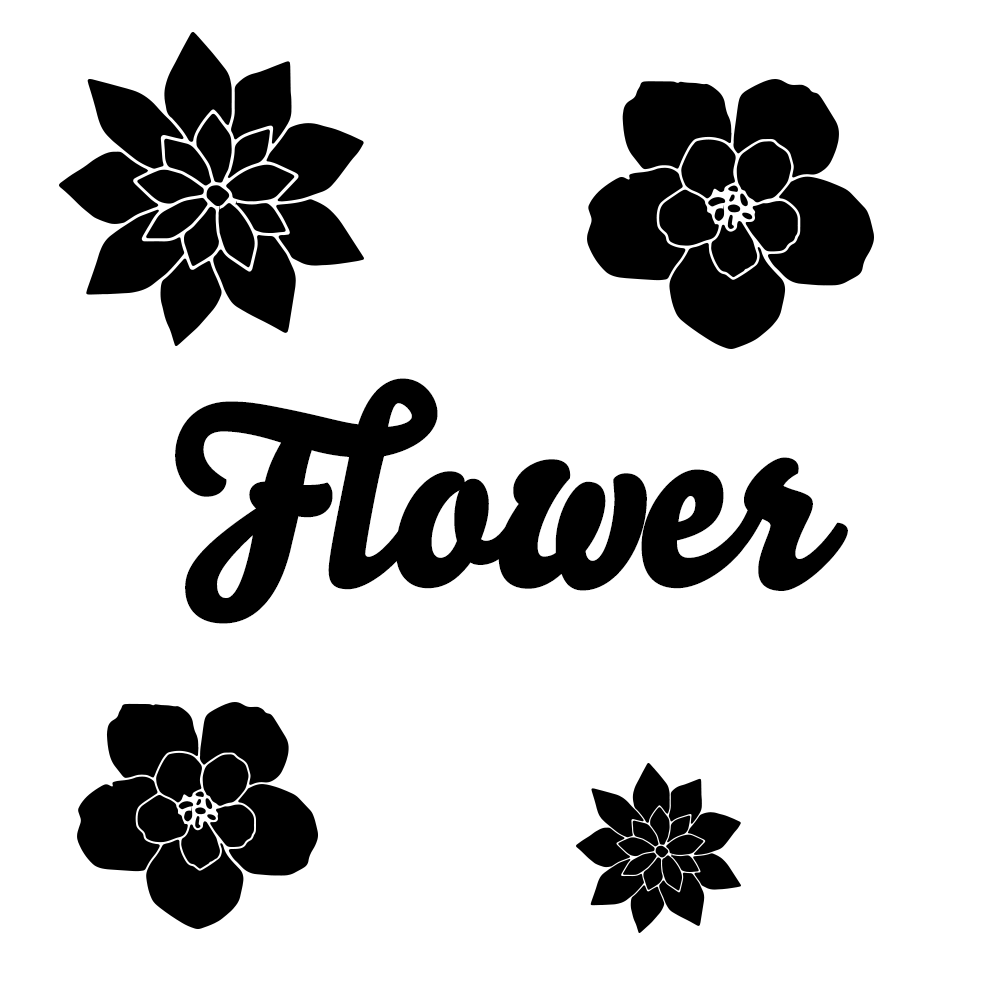
<style>
.page{position:relative;width:1000px;height:1000px;background:#ffffff}
.page>*{position:absolute;margin:0}
.t1{font:250px "BelloScriptPro-Regular";color:#000000}
</style>
<div class="page">
<p class="t1" style="left:175px;top:378px;width:673px;height:246px">Flower</p>
</div>
